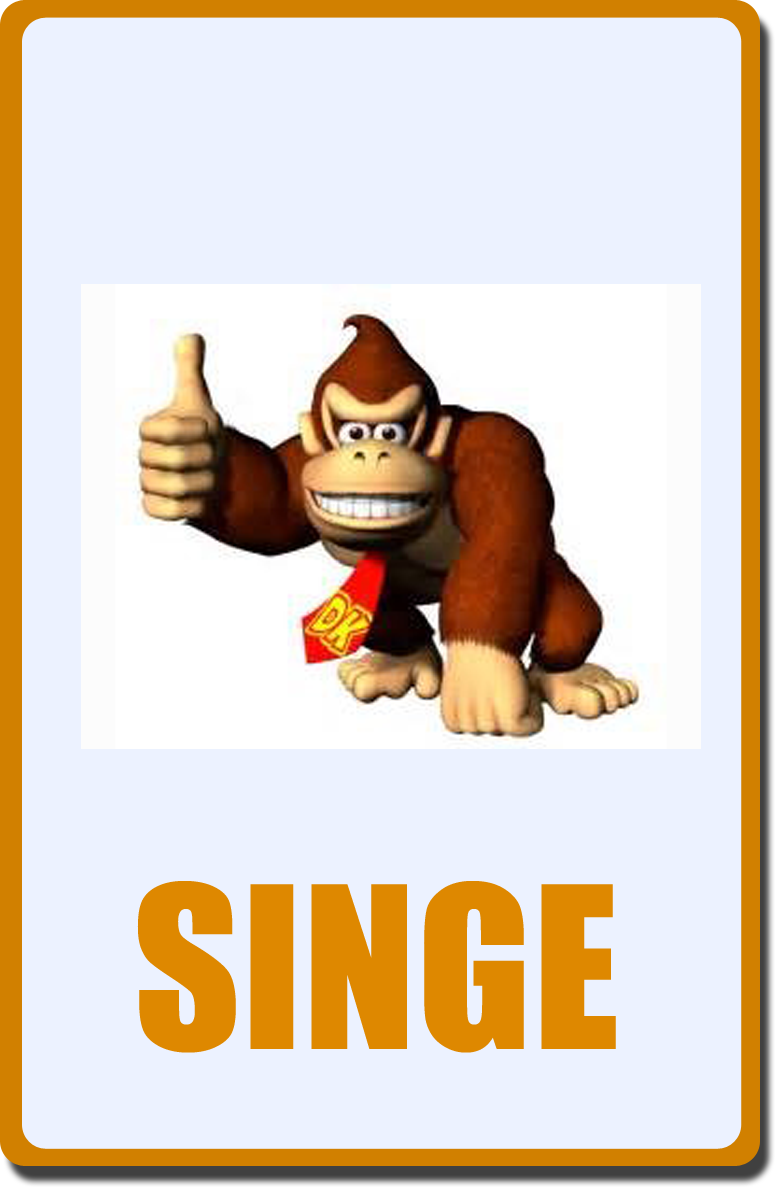
<style>
.page{position:relative;width:775px;height:1187px;background:#ecf2ff}
.page>*{position:absolute;margin:0}
.t1{font:208.3px "Impact";letter-spacing:0.005em;color:#de8800}
</style>
<div class="page">
<p class="t1" style="left:137px;top:881px;width:479px;height:172px">SINGE</p>
</div>
